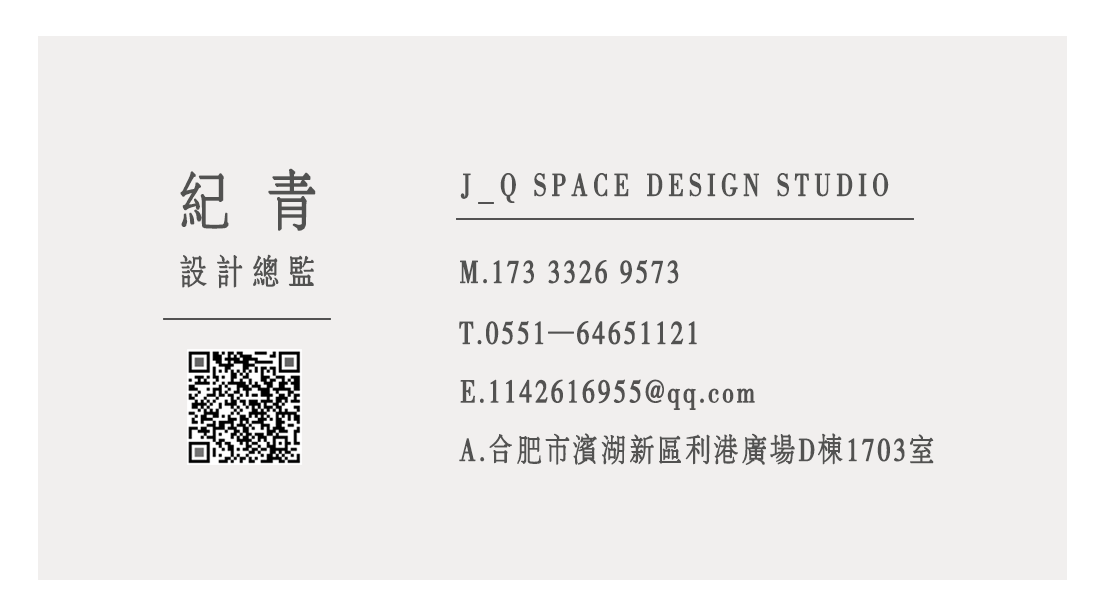
<style>
.page{position:relative;width:1098px;height:614px;background:#f1efee}
.page>*{position:absolute;margin:0}
.t1{font:66.2px "FZXLFW--GB1-0";letter-spacing:0.2em;color:#525251;font-weight:bold;scale:0.77 1}
.t2{font:32.5px "FZXLFW--GB1-0";letter-spacing:0.2em;color:#525251;font-weight:bold;scale:0.76 1}
.t3{font:35.2px "FZXLFW--GB1-0";letter-spacing:0.3em;color:#525251;font-weight:bold;scale:0.77 1}
.t4{font:32.5px "FZXLFW--GB1-0";letter-spacing:0.1em;color:#525251;font-weight:bold;scale:0.77 1}
.t5{font:32.5px "FZXLFW--GB1-0";letter-spacing:0.1em;color:#535251;font-weight:bold;scale:0.77 1}
</style>
<div class="page">
<p class="t1" style="left:180px;top:168px;width:136px;height:63px">纪 青</p>
<p class="t2" style="left:460px;top:173px;width:429px;height:30px">J  Q SPACE DESIGN STUDIO</p>
<p class="t3" style="left:180px;top:254px;width:134px;height:35px">设计总监</p>
<p class="t4" style="left:460px;top:260px;width:219px;height:24px">M.173 3326 9573</p>
<p class="t4" style="left:459px;top:321px;width:238px;height:24px">T.0551—64651121</p>
<p class="t5" style="left:460px;top:379px;width:295px;height:31px">E.1142616955@qq.com</p>
<p class="t4" style="left:459px;top:433px;width:475px;height:32px">A.合肥市滨湖新区利港广场D栋1703室</p>
</div>
